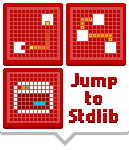
<style>
.page{position:relative;width:129px;height:150px;background:#ffffff}
.page>*{position:absolute;margin:0}
.t1{font:15px "NokiaCellphoneFC-Small";color:#c00000}
</style>
<div class="page">
<p class="t1" style="left:69px;top:74px;width:49px;height:49px;text-align:center">Jump<br>to<br>Stdlib</p>
<p class="t1" style="left:69px;top:73px;width:49px;height:49px;text-align:center">Jump<br>to<br>Stdlib</p>
</div>
